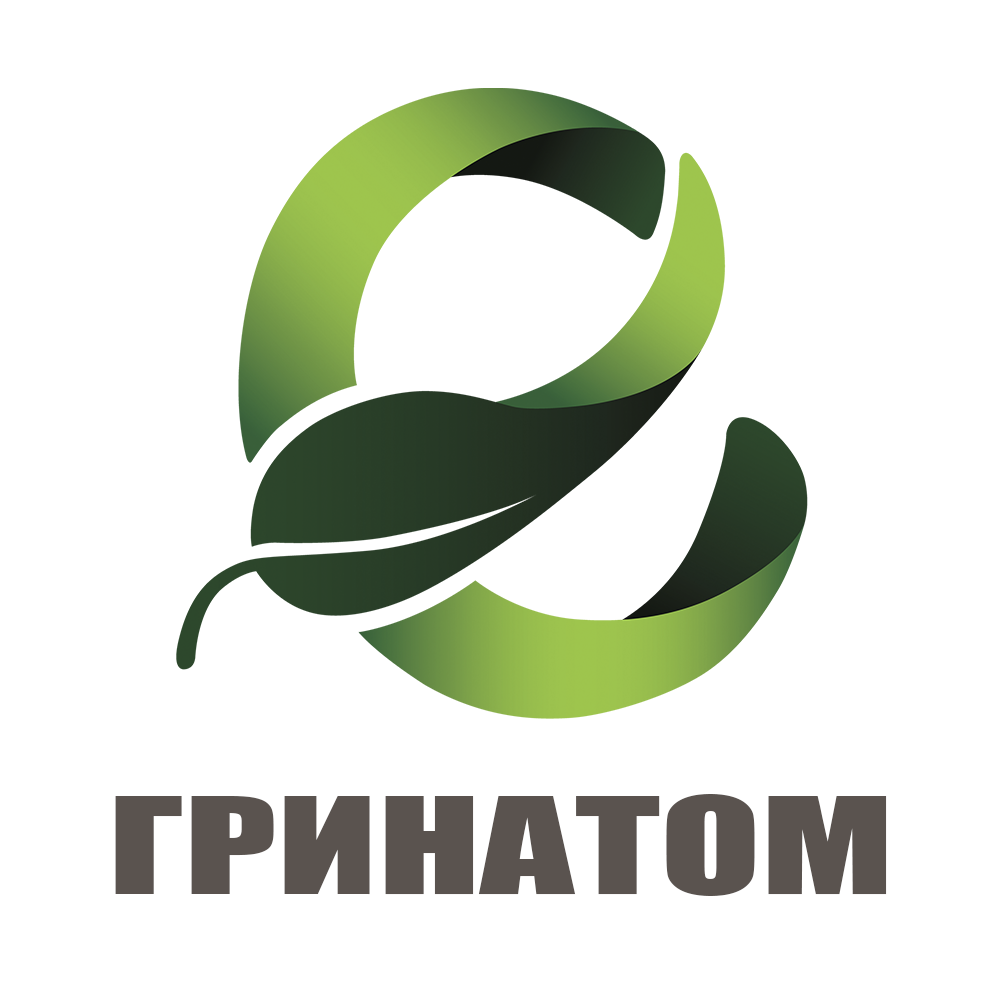
<style>
.page{position:relative;width:1000px;height:1000px;background:#ffffff}
.page>*{position:absolute;margin:0}
.t1{font:124px "Impact";color:#5a534f;scale:1.49 1}
</style>
<div class="page">
<p class="t1" style="left:115px;top:794px;width:772px;height:102px">ГРИНАТОМ</p>
</div>
